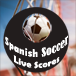
<style>
.page{position:relative;width:76px;height:76px;background:#221d1d}
.page>*{position:absolute;margin:0}
.t1{font:9.3px "BerlinSansFBDemi-Bold";color:#ffffff}
.t2{font:11.1px "TwCenMT-CondensedExtraBold";color:#ffffff}
.t3{font:11.1px "BernardMT-Condensed";color:#ffffff}
</style>
<div class="page">
<p class="t1" style="left:5px;top:35px;width:63px;height:34px;text-align:center"><span class="t2">Spanish </span><span class="t3">Soccer<br></span>Live Scores</p>
</div>
